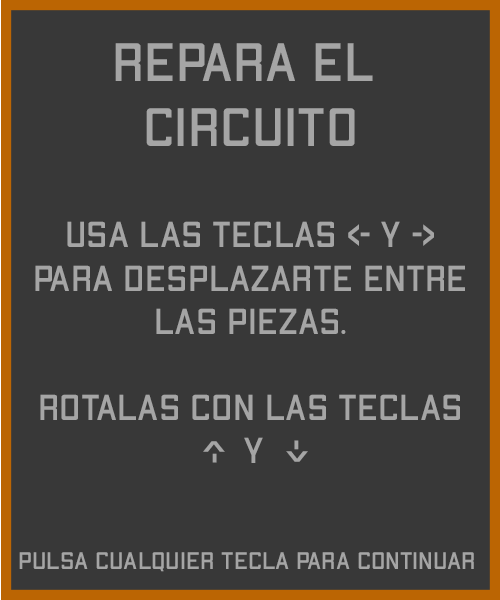
<style>
.page{position:relative;width:500px;height:600px;background:#383838}
.page>*{position:absolute;margin:0}
.t1{font:54px "ApexMk2-Regular";color:#a5a5a5}
.t2{font:36px "ApexMk2-Regular";color:#a5a5a5}
.t3{font:36px "ApexMk2-Regular";color:#383838}
.t4{font:36.1px "ApexMk2-Regular";color:#a5a5a5}
.t5{font:24px "ApexMk2-Regular";color:#a5a5a5}
</style>
<div class="page">
<p class="t1" style="left:115px;top:43px;width:258px;height:103px;text-align:center">repara el <br>circuito</p>
<p class="t2" style="left:35px;top:221px;width:430px;height:242px;text-align:center">usa las teclas &lt;- y -&gt;<br>para desplazarte entre<br>las piezas.<br><br>rotalas con las teclas<br><span class="t3">w</span> y <span class="t3">s</span></p>
<p class="t4" style="left:203px;top:441px;width:22px;height:22px;rotate:90deg">&lt;-</p>
<p class="t4" style="left:286px;top:440px;width:22px;height:22px;rotate:-90deg">&lt;-</p>
<p class="t5" style="left:19px;top:552px;width:455px;height:20px">pulsa cualquier tecla para continuar</p>
</div>
